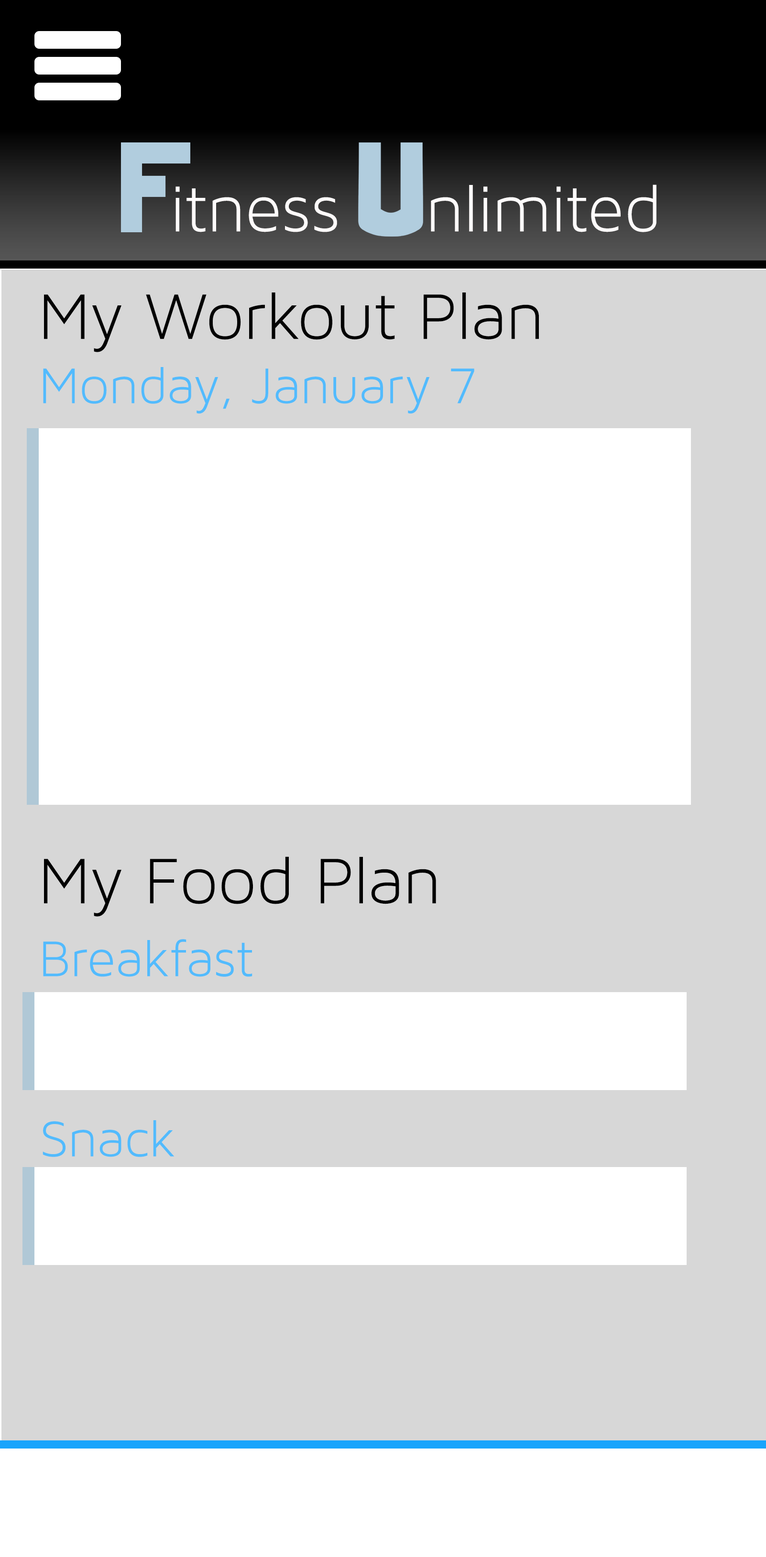
<style>
.page{position:relative;width:766px;height:1557px;background:#d7d7d7}
.page>*{position:absolute;margin:0}
.t1{font:68.9px "MavenProLight300-Regular";color:#fefbfb}
.t2{font:68.9px "MavenProLight300-Regular";color:#030303}
.t3{font:53.6px "MavenProLight300-Regular";color:#52bbfd}
.t4{font:68.9px "MavenProLight300-Regular";color:#000000}
</style>
<div class="page">
<p class="t1" style="left:175px;top:185px;width:481px;height:47px">itness    nlimited</p>
<p class="t2" style="left:44px;top:293px;width:495px;height:59px">My Workout Plan</p>
<p class="t3" style="left:43px;top:367px;width:431px;height:47px">Monday, January 7</p>
<p class="t4" style="left:44px;top:857px;width:392px;height:60px">My Food Plan</p>
<p class="t3" style="left:43px;top:939px;width:209px;height:38px">Breakfast</p>
<p class="t3" style="left:43px;top:1120px;width:131px;height:37px">Snack</p>
</div>
